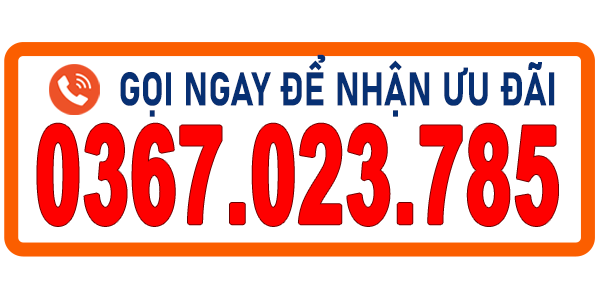
<style>
.page{position:relative;width:600px;height:300px;background:#ffffff}
.page>*{position:absolute;margin:0}
.t1{font:46.5px "Bahnschrift-Bold";letter-spacing:0.005em;color:#073073;font-weight:bold;scale:0.76 1}
.t2{font:136.2px "Arial-BoldMT";letter-spacing:0.005em;color:#fe0000;font-weight:bold;scale:0.59 1}
</style>
<div class="page">
<p class="t1" style="left:120px;top:54px;width:435px;height:63px">GỌI NGAY ĐỂ NHẬN ƯU ĐÃI</p>
<p class="t2" style="left:37px;top:123px;width:521px;height:103px">0367.023.785</p>
</div>
